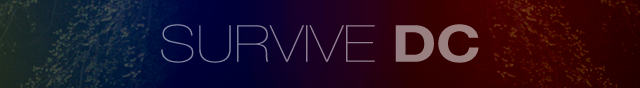
<style>
.page{position:relative;width:640px;height:88px}
.page>*{position:absolute;margin:0}
.t1{font:51px "HelveticaNeue-UltraLight";color:#998080;scale:1.18 1}
.t2{font:51px "HelveticaNeue-Bold";color:#998080;scale:1.18 1}
</style>
<div class="page">
<p class="t1" style="left:161px;top:24px;width:318px;height:39px">SURVIVE <span class="t2">DC</span></p>
</div>
